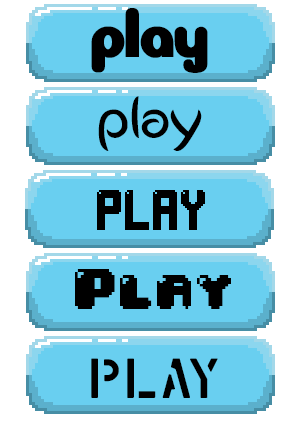
<style>
.page{position:relative;width:300px;height:422px;background:#69cff0}
.page>*{position:absolute;margin:0}
.t1{font:62.4px "New-LiteBulb";color:#000000}
.t2{font:59.4px "Logobloqo2";color:#000000}
.t3{font:40.1px "LightPixel-7";color:#000000}
.t4{font:48.2px "04bRUSBYLYAJKA-30";color:#000000}
.t5{font:52.6px "MarshStencilRegularCYR-LAT";color:#000000}
</style>
<div class="page">
<p class="t1" style="left:91px;top:8px;width:117px;height:65px">Play</p>
<p class="t2" style="left:98px;top:96px;width:104px;height:55px">Play</p>
<p class="t3" style="left:97px;top:190px;width:108px;height:40px">PLAY</p>
<p class="t4" style="left:75px;top:269px;width:156px;height:40px">Play</p>
<p class="t5" style="left:91px;top:358px;width:127px;height:40px">Play</p>
</div>
